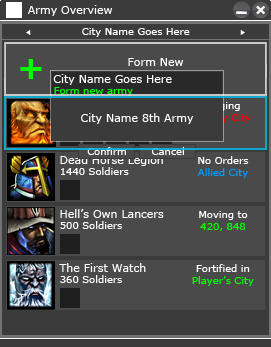
<style>
.page{position:relative;width:271px;height:347px;background:#4a4a4a}
.page>*{position:absolute;margin:0}
.t1{font:11px "Verdana";color:#ffffff}
.t2{font:10px "Verdana";color:#ffffff}
.t3{font:32px "Verdana-Bold";color:#00ff00}
.t4{font:10px "Verdana"}
.t5{font:10px "Verdana";color:#00ff00}
.t6{font:10px/12px "Verdana"}
.t7{font:10px/12px "Verdana";color:#0099ff}
.t8{font:10px/12px "Verdana";color:#ffffff}
.t9{font:10px/12px "Verdana";color:#00ff00}
</style>
<div class="page">
<p class="t1" style="left:27px;top:5px;width:86px;height:11px">Army Overview</p>
<p class="t2" style="left:82px;top:28px;width:108px;height:9px">City Name Goes Here</p>
<p class="t3" style="left:20px;top:59px;width:22px;height:20px">+</p>
<p class="t1" style="left:128px;top:58px;width:56px;height:8px">Form New</p>
<p class="t1" style="left:53px;top:74px;width:119px;height:11px">City Name Goes Here</p>
<p class="t1" style="left:53px;top:74px;width:119px;height:11px">City Name Goes Here</p>
<p class="t4" style="left:54px;top:86px;width:70px;height:10px">Disband army</p>
<p class="t5" style="left:54px;top:87px;width:79px;height:9px">Form new army</p>
<p class="t6" style="left:194px;top:102px;width:57px;height:21px;text-align:center">Sieging<br>Enemy City</p>
<p class="t1" style="left:81px;top:113px;width:113px;height:11px">City Name 8th Army</p>
<p class="t1" style="left:81px;top:113px;width:113px;height:11px">City Name 8th Army</p>
<p class="t2" style="left:87px;top:147px;width:39px;height:8px">Confirm</p>
<p class="t2" style="left:87px;top:147px;width:39px;height:8px">Confirm</p>
<p class="t2" style="left:152px;top:147px;width:32px;height:8px">Cancel</p>
<p class="t2" style="left:152px;top:147px;width:32px;height:8px">Cancel</p>
<p class="t1" style="left:60px;top:155px;width:103px;height:11px">Dead Horse Legion</p>
<p class="t7" style="left:197px;top:156px;width:52px;height:22px;text-align:center"><span class="t8">No Orders<br></span>Allied City</p>
<p class="t2" style="left:61px;top:167px;width:68px;height:8px">1440 Soldiers</p>
<p class="t1" style="left:60px;top:209px;width:104px;height:9px">Hell’s Own Lancers</p>
<p class="t2" style="left:60px;top:221px;width:62px;height:8px">500 Soldiers</p>
<p class="t8" style="left:199px;top:211px;width:49px;height:20px;text-align:center">Moving to<br><span class="t9">420, 848</span></p>
<p class="t1" style="left:59px;top:263px;width:87px;height:9px">The First Watch</p>
<p class="t9" style="left:192px;top:264px;width:62px;height:22px;text-align:center"><span class="t8">Fortified in<br></span>Player’s City</p>
<p class="t2" style="left:60px;top:275px;width:62px;height:8px">360 Soldiers</p>
</div>
